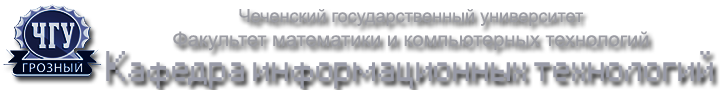
<style>
.page{position:relative;width:720px;height:90px;background:#ffffff}
.page>*{position:absolute;margin:0}
.t1{font:20px "ArialMT";color:#9b9ca3}
.t2{font:18px "ArialMT";color:#9b9ca3}
.t3{font:40px "Small Fonts";color:#999ba8}
</style>
<div class="page">
<p class="t1" style="left:173px;top:9px;width:476px;height:42px;text-align:center"><span class="t2">Чеченский государственный университет<br></span>Факультет математики и компьютерных технологий</p>
<p class="t3" style="left:106px;top:51px;width:607px;height:38px">Кафедра информационных технологий</p>
</div>
